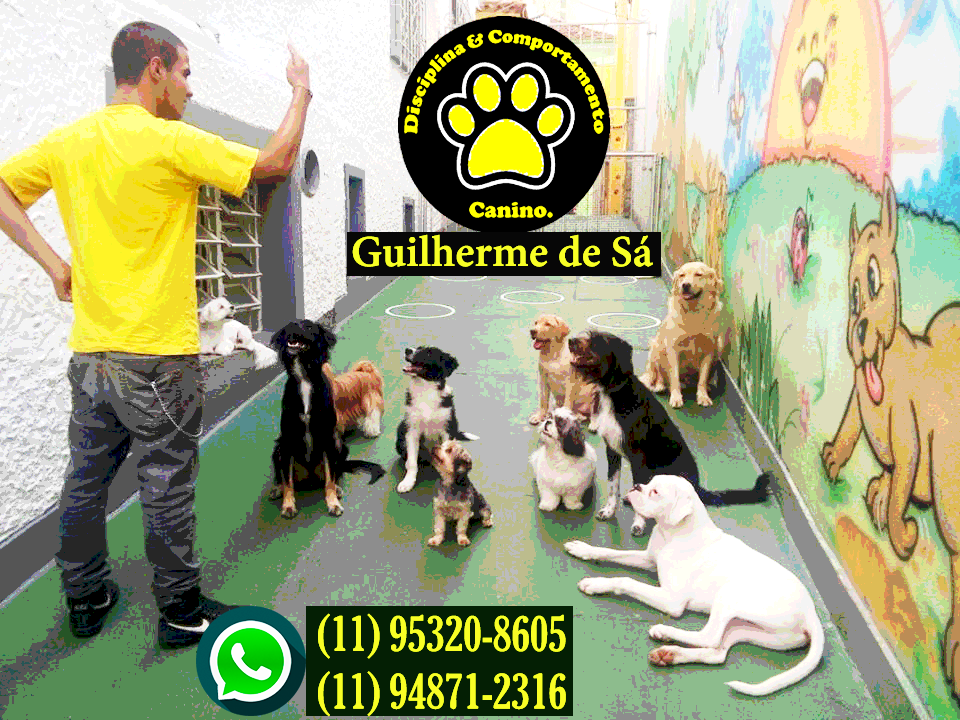
<style>
.page{position:relative;width:960px;height:720px}
.page>*{position:absolute;margin:0}
.t1{font:48px "AdobeGurmukhi-Bold";color:#e4fb24}
.t2{font:48px "GloucesterMT-ExtraCondensed";color:#e4fb24}
</style>
<div class="page">
<p class="t1" style="left:352px;top:234px;width:301px;height:33px">Guilherme de Sá</p>
<p class="t2" style="left:318px;top:613px;width:248px;height:104px;text-align:center">(11) 95320-8605<br>(11) 94871-2316</p>
</div>
